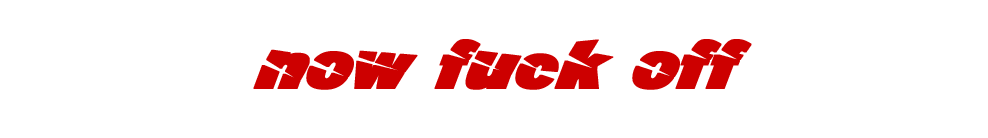
<style>
.page{position:relative;width:988px;height:138px;background:#ffffff}
.page>*{position:absolute;margin:0}
.t1{font:72px "A-Cuchillada";color:#cd0000;font-weight:bold;font-style:italic}
</style>
<div class="page">
<p class="t1" style="left:253px;top:39px;width:499px;height:51px">now fuck off</p>
</div>
